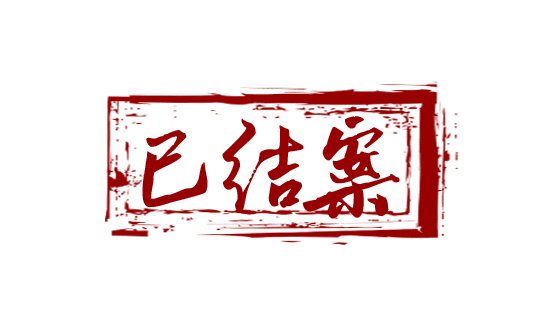
<style>
.page{position:relative;width:557px;height:331px;background:#ffffff}
.page>*{position:absolute;margin:0}
.t1{font:92.4px "momozhiyuan-Regular";letter-spacing:-0.05em;color:#960000}
</style>
<div class="page">
<p class="t1" style="left:142px;top:116px;width:258px;height:103px">已结案</p>
</div>
